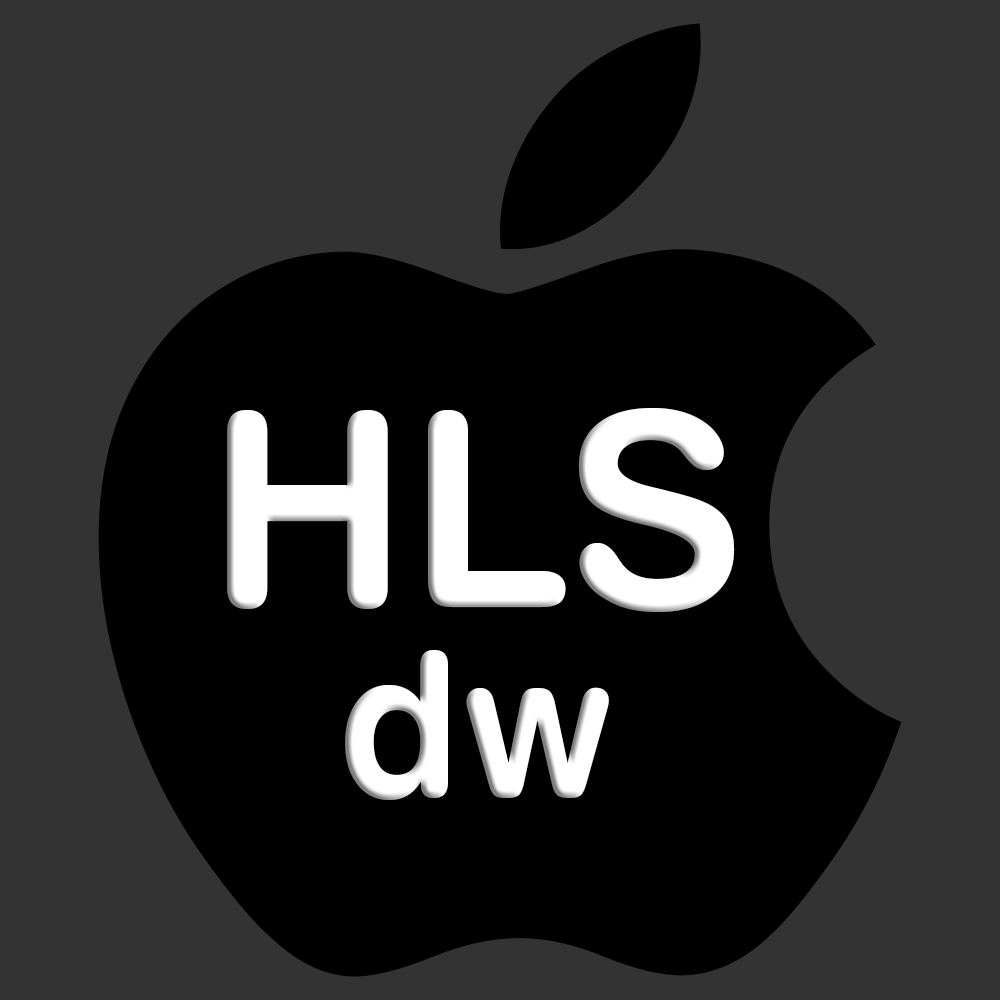
<style>
.page{position:relative;width:1000px;height:1000px;background:#333333}
.page>*{position:absolute;margin:0}
.t1{font:270px "Swiss721BT-BoldRounded";color:#ffffff}
.t2{font:200px "Swiss721BT-BoldRounded";color:#ffffff}
</style>
<div class="page">
<p class="t1" style="left:227px;top:408px;width:508px;height:204px">HLS</p>
<p class="t2" style="left:345px;top:650px;width:264px;height:150px">dw</p>
</div>
